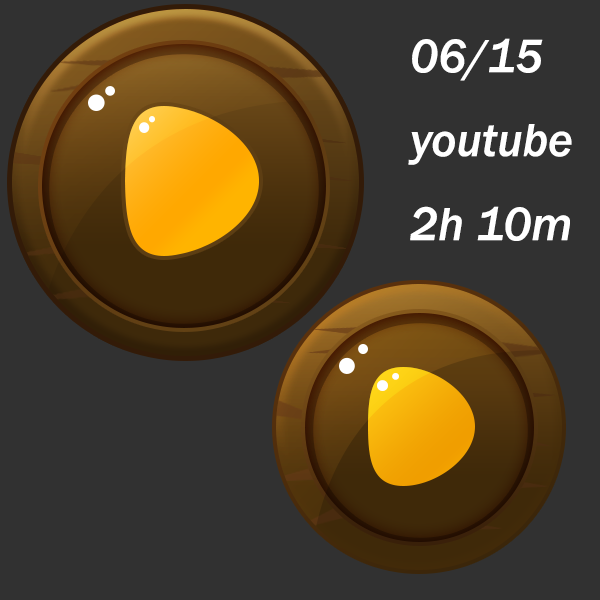
<style>
.page{position:relative;width:600px;height:600px;background:#313131}
.page>*{position:absolute;margin:0}
.t1{font:48px "FranklinGothic-MediumItalic";color:#ffffff}
</style>
<div class="page">
<p class="t1" style="left:408px;top:38px;width:164px;height:203px">06/15<br>youtube<br>2h 10m</p>
</div>
